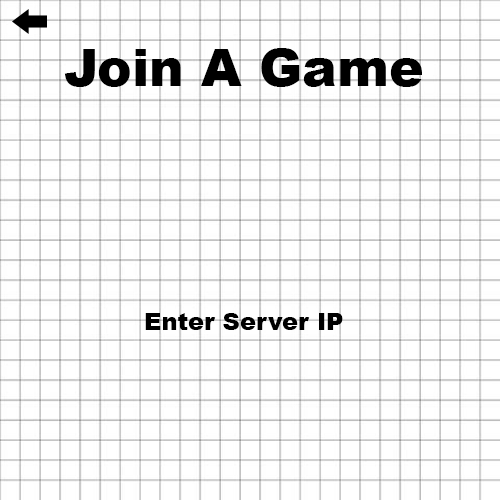
<style>
.page{position:relative;width:500px;height:500px;background:#ffffff}
.page>*{position:absolute;margin:0}
.t1{font:52.1px "Arial-Black";color:#000000}
.t2{font:24px "Arial-Black";color:#000000}
</style>
<div class="page">
<p class="t1" style="left:64px;top:48px;width:358px;height:39px">Join A Game</p>
<p class="t2" style="left:145px;top:313px;width:198px;height:17px">Enter Server IP</p>
</div>
